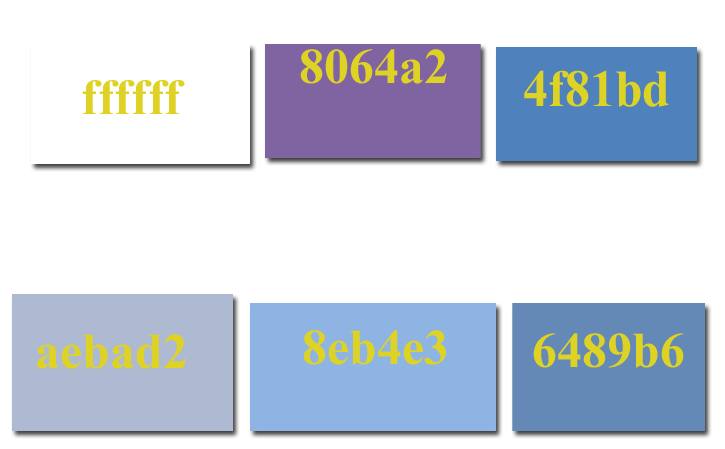
<style>
.page{position:relative;width:725px;height:449px;background:#ffffff}
.page>*{position:absolute;margin:0}
.t1{font:50px "TimesNewRomanPS-BoldMT";color:#ded325}
.t2{font:52.1px "TimesNewRomanPS-BoldMT";color:#ded325;scale:0.96 1}
</style>
<div class="page">
<p class="t1" style="left:300px;top:49px;width:147px;height:35px">8064a2</p>
<p class="t2" style="left:524px;top:70px;width:145px;height:37px">4f81bd</p>
<p class="t1" style="left:82px;top:80px;width:103px;height:34px">ffffff</p>
<p class="t1" style="left:37px;top:334px;width:149px;height:35px">aebad2</p>
<p class="t1" style="left:303px;top:330px;width:143px;height:35px">8eb4e3</p>
<p class="t1" style="left:533px;top:333px;width:151px;height:35px">6489b6</p>
</div>
